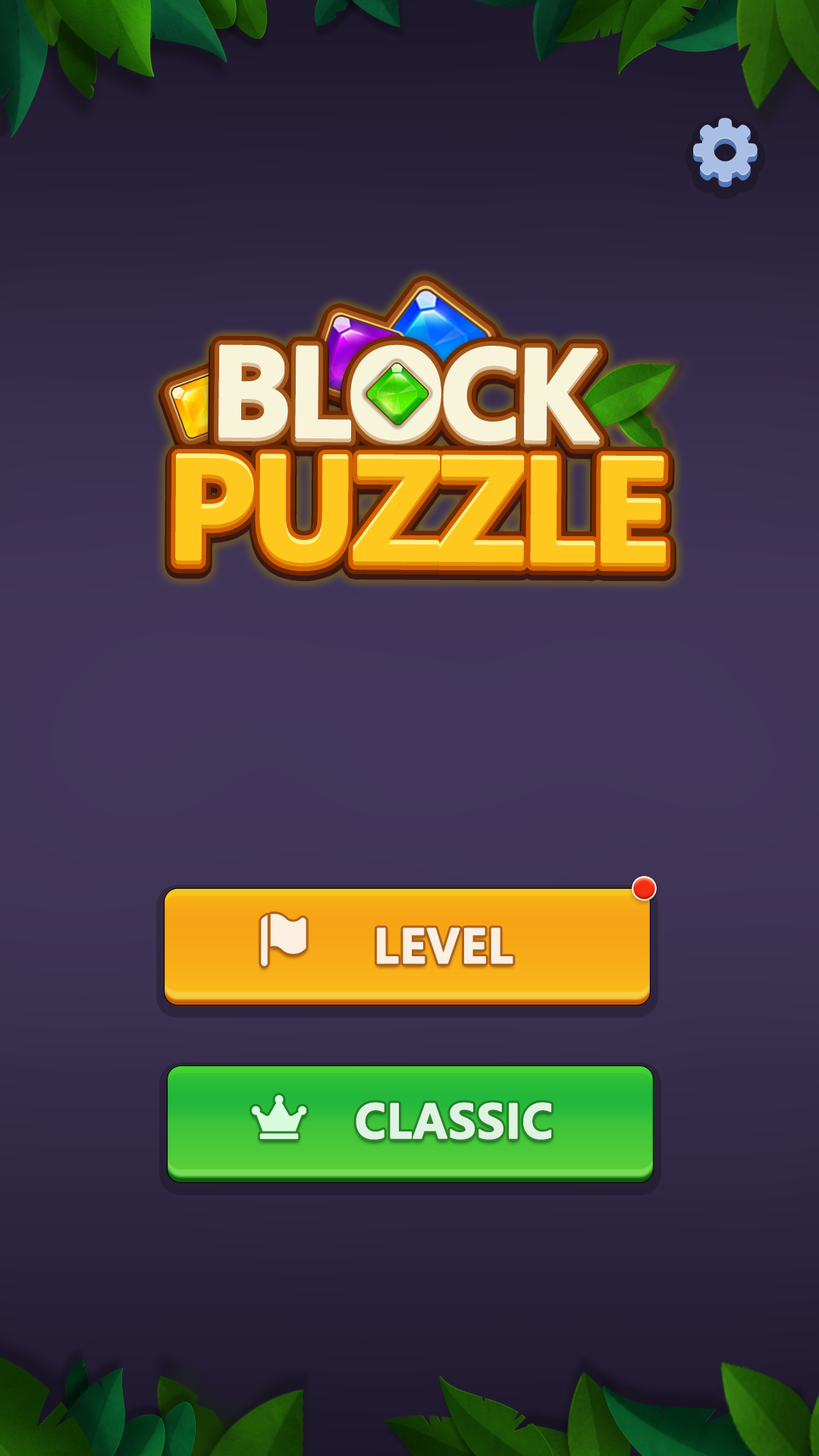
<style>
.page{position:relative;width:819px;height:1456px}
.page>*{position:absolute;margin:0}
.t1{font:118px "MicrosoftYaHei-Bold";letter-spacing:-0.06em;color:#f7f4da;font-weight:bold}
.t2{font:136.4px "MicrosoftYaHei-Bold";letter-spacing:-0.06em;color:#ffc81e;font-weight:bold}
.t3{font:45.5px "MicrosoftYaHei-Bold";color:#f9e5d3;text-transform:uppercase;font-weight:bold}
.t4{font:45.5px "MicrosoftYaHei-Bold";color:#e0f3e3;text-transform:uppercase;font-weight:bold}
</style>
<div class="page">
<p class="t1" style="left:218px;top:344px;width:382px;height:98px;rotate:1deg">BLOCK</p>
<p class="t2" style="left:175px;top:453px;width:491px;height:110px">PUZZLE</p>
<p class="t3" style="left:377px;top:927px;width:136px;height:37px">Level</p>
<p class="t4" style="left:356px;top:1102px;width:195px;height:38px">Classic</p>
</div>
